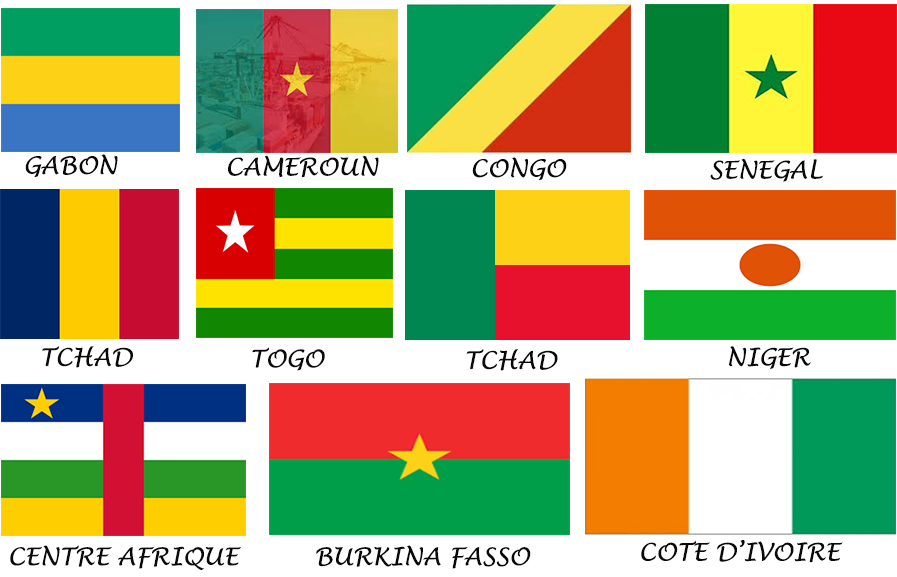
<style>
.page{position:relative;width:897px;height:577px;background:#ffffff}
.page>*{position:absolute;margin:0}
.t1{font:24px "LucidaHandwriting-Italic";color:#090909}
</style>
<div class="page">
<p class="t1" style="left:25px;top:154px;width:93px;height:23px">GABON</p>
<p class="t1" style="left:228px;top:155px;width:151px;height:23px">CAMEROUN</p>
<p class="t1" style="left:472px;top:157px;width:95px;height:23px">CONGO</p>
<p class="t1" style="left:710px;top:158px;width:113px;height:24px">SENEGAL</p>
<p class="t1" style="left:42px;top:346px;width:91px;height:22px">TCHAD</p>
<p class="t1" style="left:252px;top:347px;width:73px;height:24px">TOGO</p>
<p class="t1" style="left:466px;top:349px;width:92px;height:22px">TCHAD</p>
<p class="t1" style="left:729px;top:346px;width:82px;height:23px">NIGER</p>
<p class="t1" style="left:10px;top:545px;width:232px;height:25px">CENTRE AFRIQUE</p>
<p class="t1" style="left:316px;top:545px;width:215px;height:24px">BURKINA FASSO</p>
<p class="t1" style="left:641px;top:539px;width:202px;height:24px">COTE D’IVOIRE</p>
</div>
